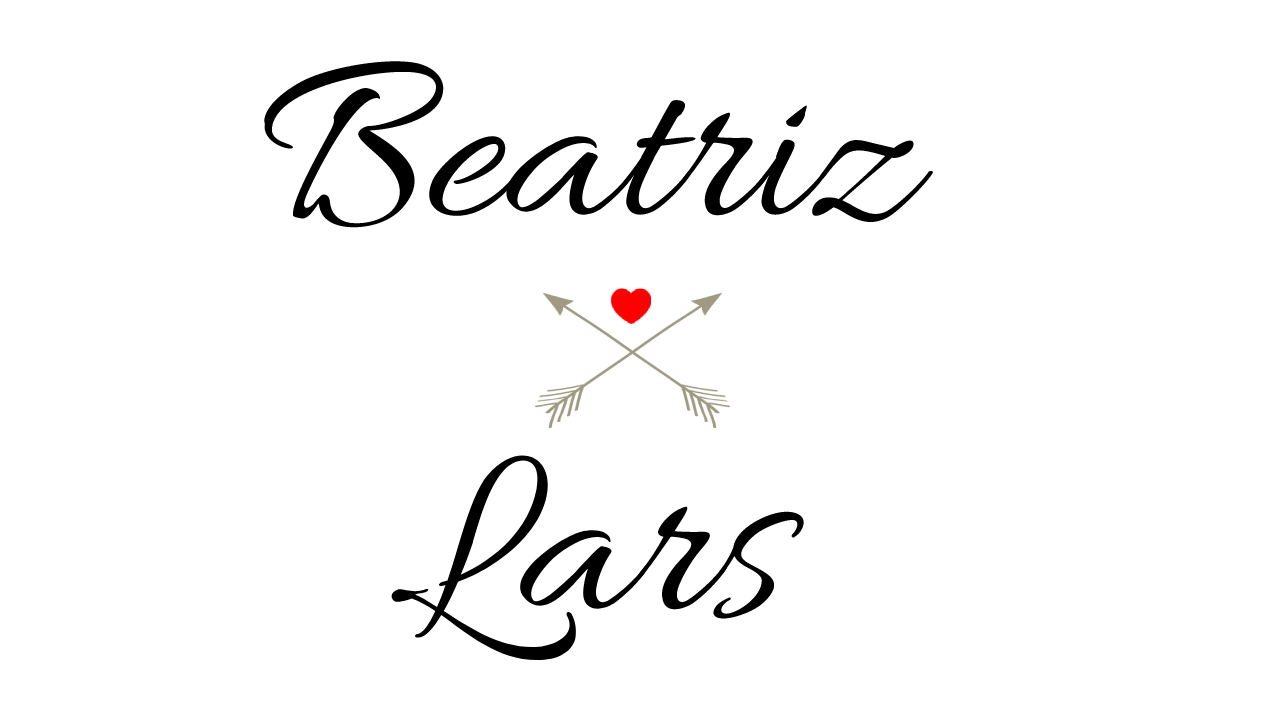
<style>
.page{position:relative;width:1280px;height:720px;background:#ffffff}
.page>*{position:absolute;margin:0}
.t1{font:250px "Allura-Regular";color:#000000}
</style>
<div class="page">
<p class="t1" style="left:262px;top:56px;width:673px;height:172px">Beatriz</p>
<p class="t1" style="left:389px;top:442px;width:419px;height:222px">Lars</p>
</div>
